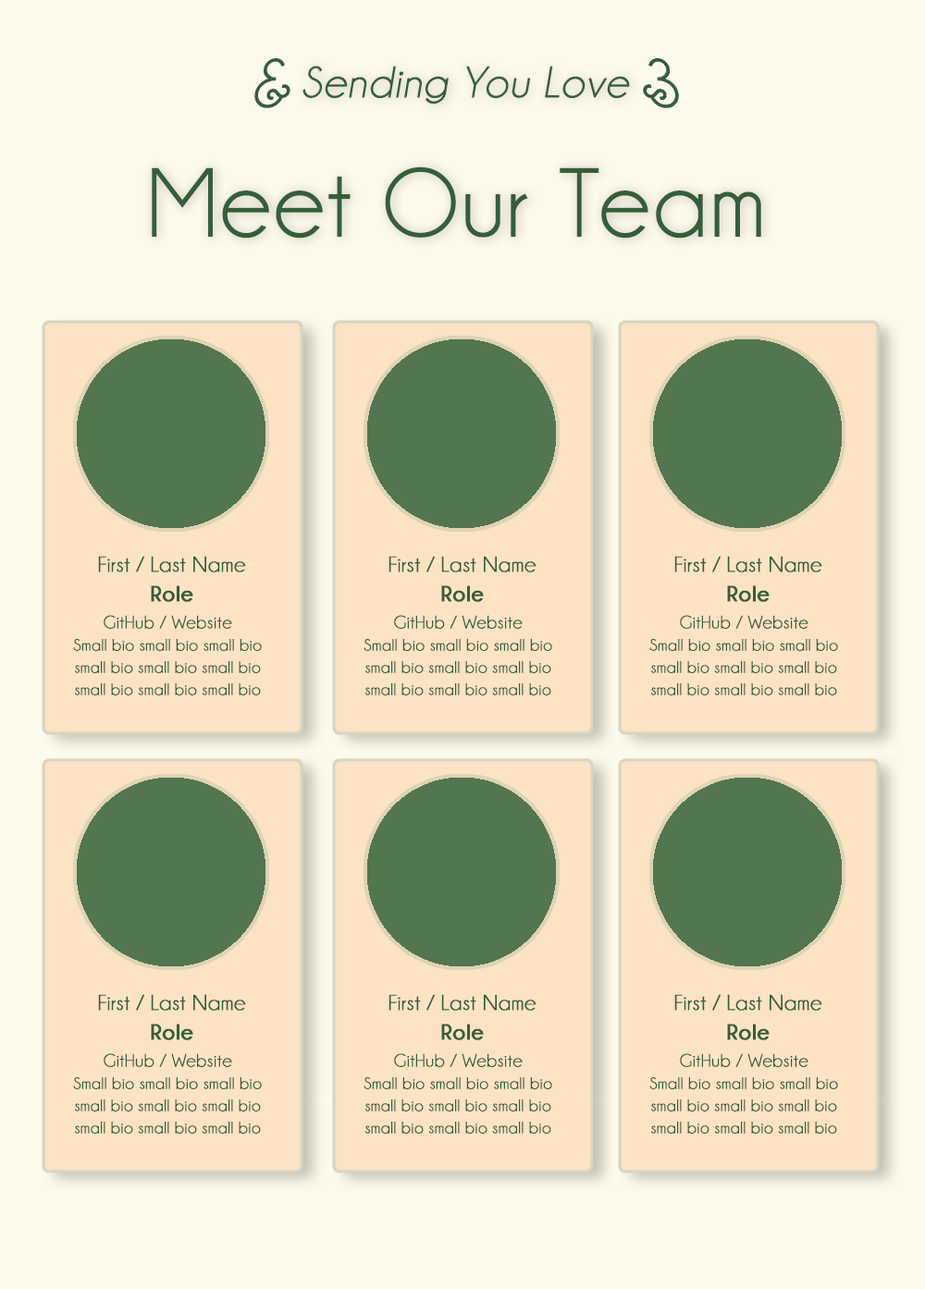
<style>
.page{position:relative;width:925px;height:1289px;background:#fcfae9}
.page>*{position:absolute;margin:0}
.t1{font:69.4px "Champagne&Limousines-Italic";letter-spacing:0.01em;color:#355e3b;font-weight:bold}
.t2{font:44.4px "Champagne&Limousines-Italic";letter-spacing:0.01em;color:#355e3b;font-weight:bold}
.t3{font:98px "Champagne&Limousines";letter-spacing:0.01em;color:#355e3b;font-weight:bold}
.t4{font:22.2px/29.6px "Champagne&Limousines";letter-spacing:0.01em;color:#355e3b;font-weight:bold}
.t5{font:22.2px/29.6px "Champagne&Limousines-Bold";letter-spacing:0.01em;color:#355e3b;font-weight:bold}
.t6{font:16.6px/22.2px "Champagne&Limousines";letter-spacing:0.01em;color:#355e3b;font-weight:bold}
.t7{font:18.5px/22.2px "Champagne&Limousines";letter-spacing:0.01em;color:#355e3b;font-weight:bold}
</style>
<div class="page">
<p class="t1" style="left:254px;top:58px;width:36px;height:50px">&amp;</p>
<p class="t2" style="left:302px;top:66px;width:328px;height:39px">Sending You Love</p>
<p class="t3" style="left:152px;top:166px;width:609px;height:73px">Meet Our Team</p>
<p class="t4" style="left:98px;top:556px;width:148px;height:46px;text-align:center">First / Last Name<br><span class="t5">Role</span></p>
<p class="t4" style="left:388px;top:556px;width:148px;height:46px;text-align:center">First / Last Name<br><span class="t5">Role</span></p>
<p class="t4" style="left:674px;top:556px;width:148px;height:46px;text-align:center">First / Last Name<br><span class="t5">Role</span></p>
<p class="t6" style="left:73px;top:615px;width:189px;height:81px;text-align:center"><span class="t7">GitHub / Website<br></span>Small bio small bio small bio small bio small bio small bio small bio small bio small bio</p>
<p class="t6" style="left:363px;top:615px;width:189px;height:81px;text-align:center"><span class="t7">GitHub / Website<br></span>Small bio small bio small bio small bio small bio small bio small bio small bio small bio</p>
<p class="t6" style="left:649px;top:615px;width:189px;height:81px;text-align:center"><span class="t7">GitHub / Website<br></span>Small bio small bio small bio small bio small bio small bio small bio small bio small bio</p>
<p class="t4" style="left:98px;top:994px;width:148px;height:46px;text-align:center">First / Last Name<br><span class="t5">Role</span></p>
<p class="t4" style="left:388px;top:994px;width:148px;height:46px;text-align:center">First / Last Name<br><span class="t5">Role</span></p>
<p class="t4" style="left:674px;top:994px;width:148px;height:46px;text-align:center">First / Last Name<br><span class="t5">Role</span></p>
<p class="t6" style="left:73px;top:1053px;width:189px;height:81px;text-align:center"><span class="t7">GitHub / Website<br></span>Small bio small bio small bio small bio small bio small bio small bio small bio small bio</p>
<p class="t6" style="left:363px;top:1053px;width:189px;height:81px;text-align:center"><span class="t7">GitHub / Website<br></span>Small bio small bio small bio small bio small bio small bio small bio small bio small bio</p>
<p class="t6" style="left:649px;top:1053px;width:189px;height:81px;text-align:center"><span class="t7">GitHub / Website<br></span>Small bio small bio small bio small bio small bio small bio small bio small bio small bio</p>
</div>
